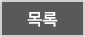
<style>
.page{position:relative;width:85px;height:37px;background:#59595a}
.page>*{position:absolute;margin:0}
.t1{font:17px "YDIYGO330";letter-spacing:0.03em;color:#ffffff;scale:0.95 1}
</style>
<div class="page">
<p class="t1" style="left:27px;top:12px;width:31px;height:15px">목록</p>
</div>
